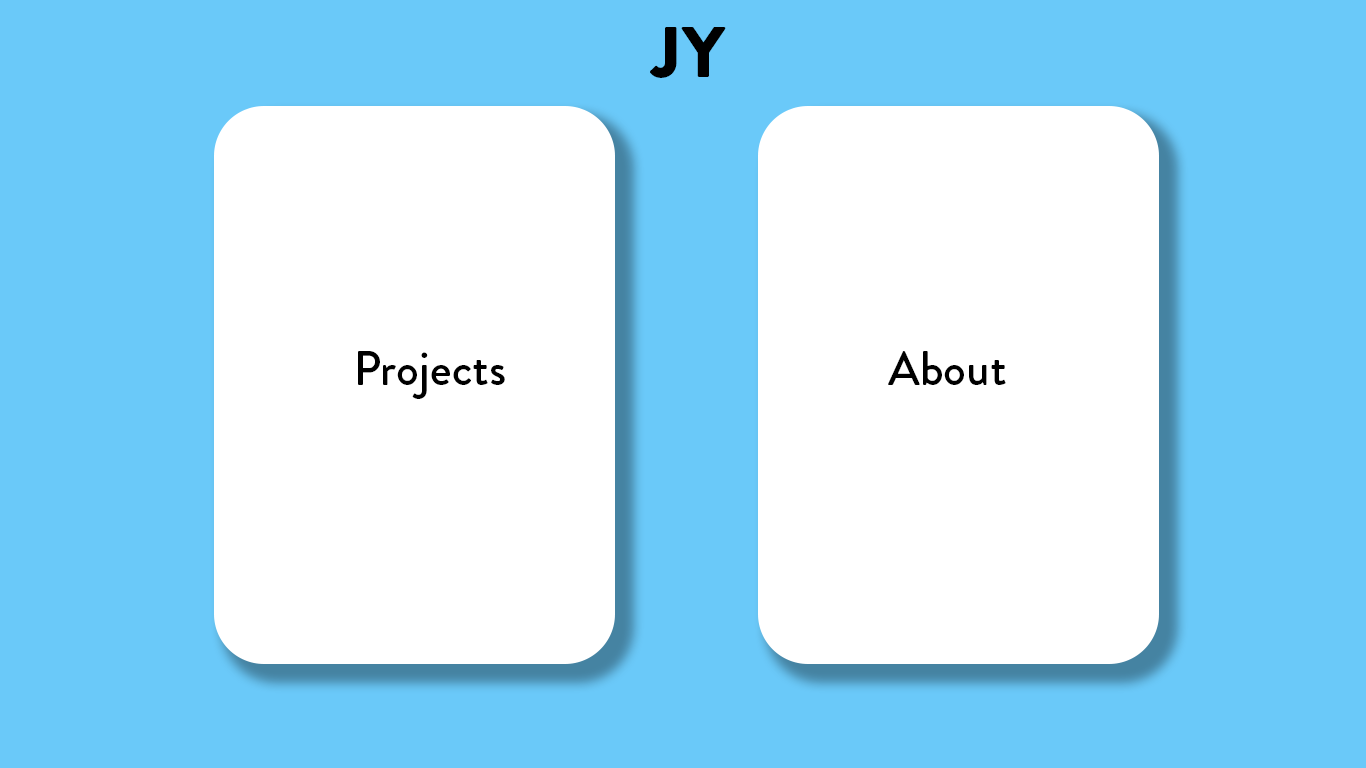
<style>
.page{position:relative;width:1366px;height:768px;background:#6ac9f9}
.page>*{position:absolute;margin:0}
.t1{font:72px "BrandonGrotesque-Black";color:#000000}
.t2{font:48px "BrandonGrotesque-Medium";color:#000000}
</style>
<div class="page">
<p class="t1" style="left:650px;top:27px;width:76px;height:51px">JY</p>
<p class="t2" style="left:358px;top:351px;width:147px;height:48px">Projects</p>
<p class="t2" style="left:888px;top:351px;width:118px;height:34px">About</p>
</div>
